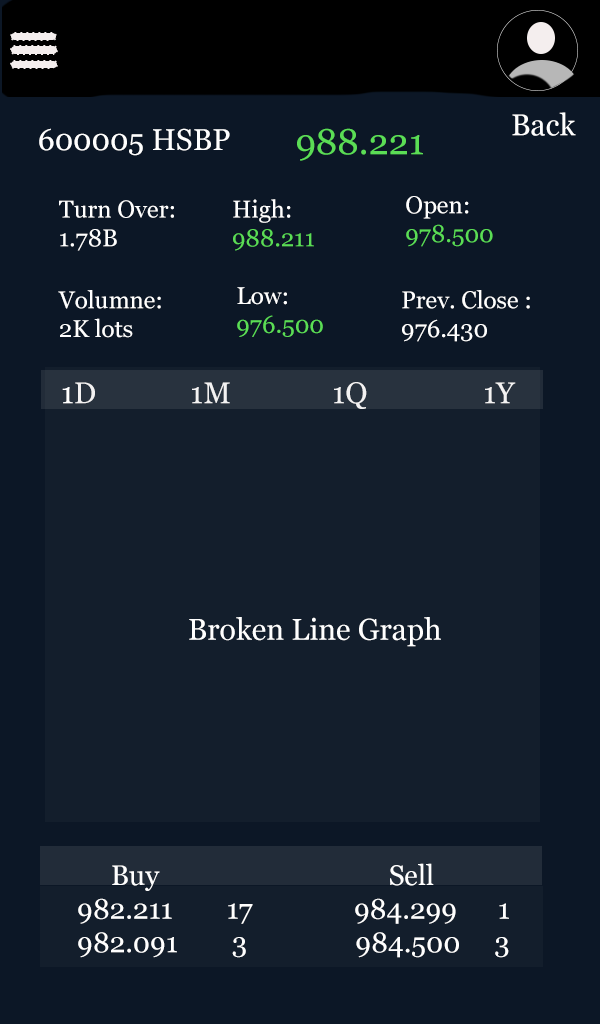
<style>
.page{position:relative;width:600px;height:1024px;background:#0c1726}
.page>*{position:absolute;margin:0}
.t1{font:30px "Georgia";color:#ffffff}
.t2{font:36px "Georgia";color:#5bdd55}
.t3{font:24px "Georgia";color:#5bdd55}
.t4{font:24px "Georgia";color:#ffffff}
.t5{font:30px "Georgia";color:#f3f2f2}
.t6{font:28px "Georgia";color:#ffffff}
</style>
<div class="page">
<p class="t1" style="left:512px;top:112px;width:64px;height:24px">Back</p>
<p class="t1" style="left:39px;top:128px;width:191px;height:28px">600005 HSBP</p>
<p class="t2" style="left:297px;top:128px;width:126px;height:33px">988.221</p>
<p class="t3" style="left:406px;top:196px;width:87px;height:51px"><span class="t4">Open:<br></span>978.500</p>
<p class="t4" style="left:59px;top:200px;width:115px;height:51px">Turn Over:<span class="t1"> <br></span>1.78B</p>
<p class="t3" style="left:233px;top:199px;width:81px;height:52px"><span class="t4">High:<br></span>988.211</p>
<p class="t4" style="left:58px;top:290px;width:103px;height:48px">Volumne:<br>2K lots</p>
<p class="t3" style="left:237px;top:287px;width:86px;height:50px"><span class="t4">Low:<br></span>976.500</p>
<p class="t4" style="left:402px;top:290px;width:128px;height:52px">Prev. Close :<br>976.430</p>
<p class="t5" style="left:62px;top:382px;width:454px;height:27px"><span class="t1">1</span>D             1M              1Q                1Y</p>
<p class="t1" style="left:189px;top:617px;width:252px;height:30px">Broken Line Graph</p>
<p class="t6" style="left:78px;top:863px;width:431px;height:95px">Buy                                  Sell<br>982.211        17               984.299      1<br>982.091        3                984.500     3</p>
</div>
